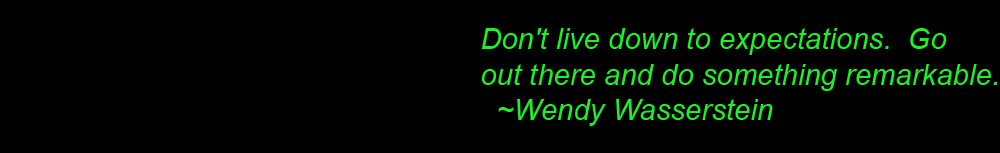
<style>
.page{position:relative;width:1000px;height:153px;background:#000000}
.page>*{position:absolute;margin:0}
.t1{font:29.3px "Arial-ItalicMT";color:#1af324}
</style>
<div class="page">
<p class="t1" style="left:481px;top:28px;width:517px;height:98px">Don't live down to expectations.  Go <br>out there and do something remarkable.<br>  ~Wendy Wasserstein</p>
</div>
